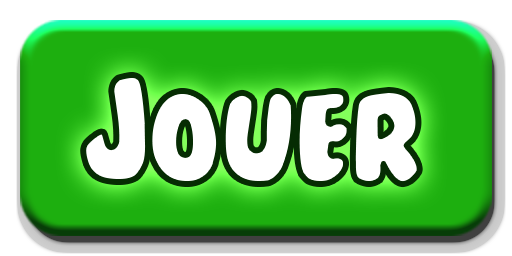
<style>
.page{position:relative;width:512px;height:256px;background:#ffffff}
.page>*{position:absolute;margin:0}
.t1{font:120px "BubbleGum";letter-spacing:-0.035em;color:#ffffff}
.t2{font:144px "BubbleGum";letter-spacing:-0.035em;color:#ffffff}
</style>
<div class="page">
<p class="t1" style="left:83px;top:75px;width:337px;height:110px"><span class="t2">J</span>ouer</p>
</div>
